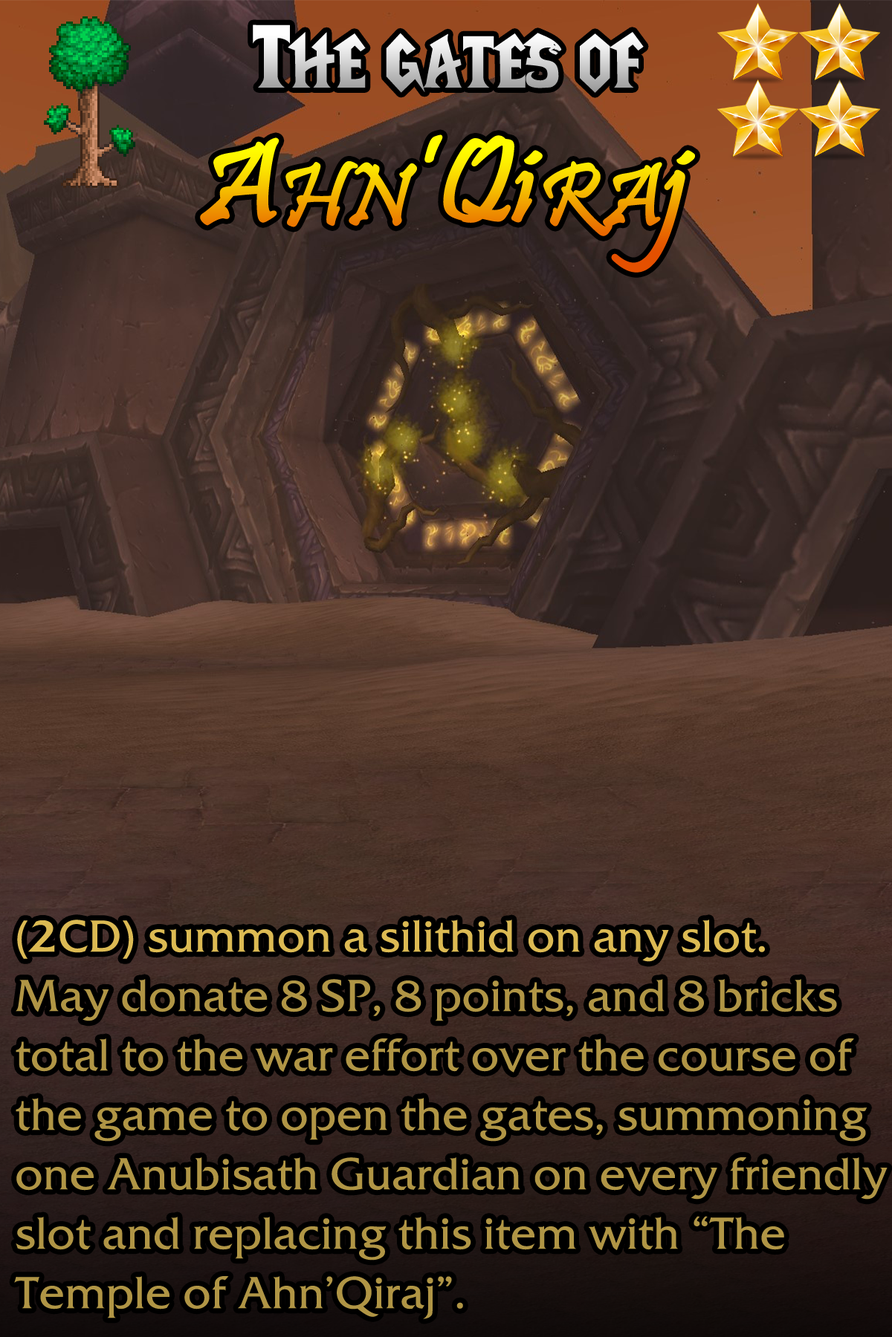
<style>
.page{position:relative;width:892px;height:1337px}
.page>*{position:absolute;margin:0}
.t1{font:89.2px "LifeCraft"}
.t2{font:118.9px "Pristina-Regular";font-weight:bold}
.t3{font:89.2px "Pristina-Regular";font-weight:bold}
.t4{font:44.6px/59.4px "FrizQua-ReguOS";color:#b09545}
.t5{font:44.6px/59.4px "FrizQua-ReguOS";color:#dcba53}
.t6{font:61.7px/59.4px "FrizQua-ReguOS";color:#dcba53}
</style>
<div class="page">
<p class="t1" style="left:253px;top:25px;width:390px;height:68px">The gates of</p>
<p class="t2" style="left:200px;top:134px;width:495px;height:139px">A<span class="t3">HN</span>’Qi<span class="t3">RA</span>j</p>
<p class="t4" style="left:14px;top:920px;width:873px;height:400px"><span class="t5">(</span><span class="t6">2</span><span class="t5">CD) summon a silithid on any slot.<br></span>May donate 8 SP, 8 points, and 8 bricks total to the war effort over the course of the game to open the gates, summoning one Anubisath Guardian on every friendly slot and replacing this item with “The Temple of Ahn’Qiraj”.</p>
</div>
